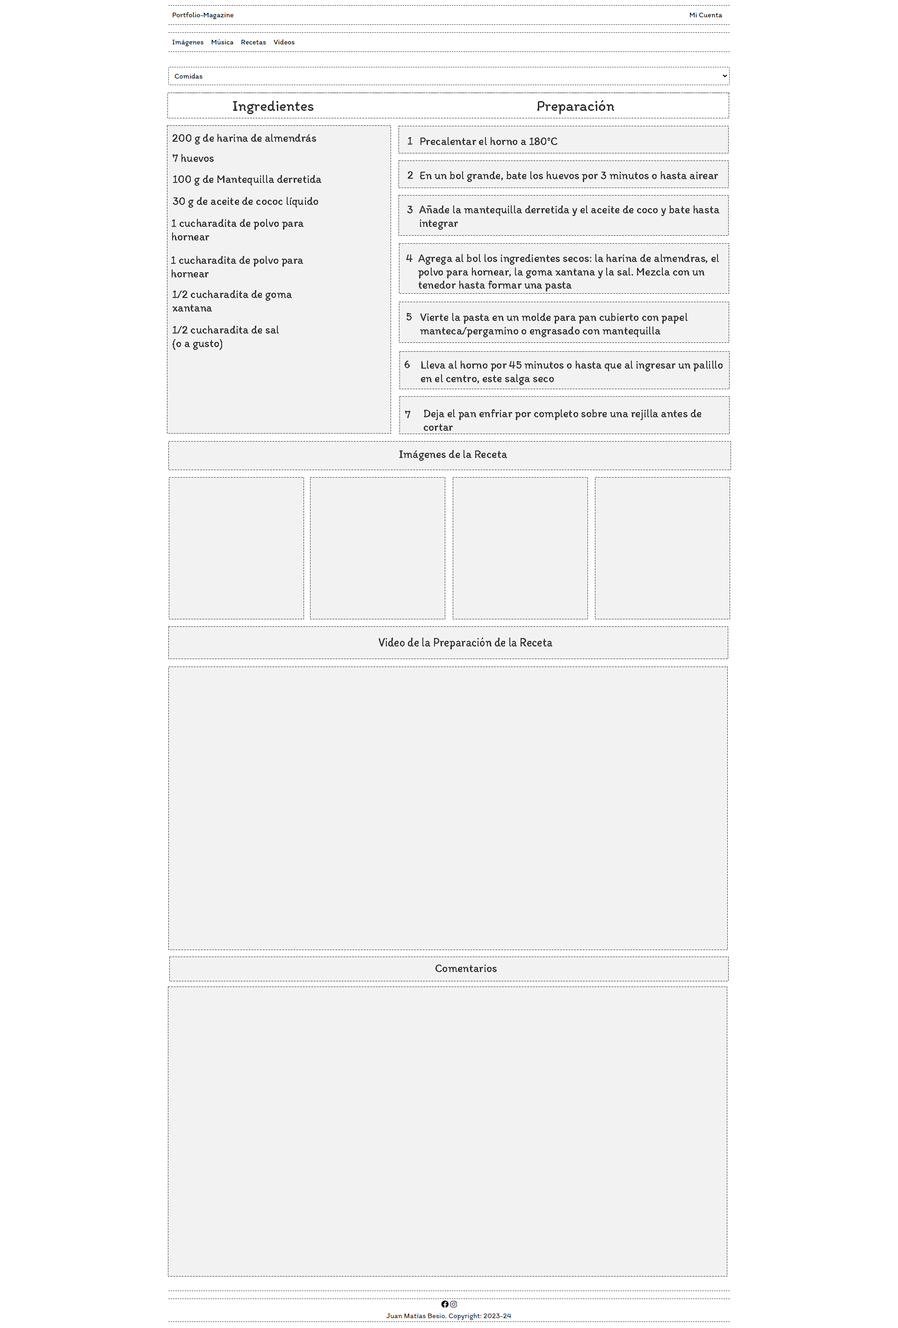
<style>
.page{position:relative;width:898px;height:1328px;background:#f2f2f2}
.page>*{position:absolute;margin:0}
.t1{font:15px "Itim-Regular";color:#333333}
.t2{font:11.2px "Itim-Regular";color:#333333}
.t3{font:12.7px "Itim-Regular";color:#333333;scale:0.88 1}
</style>
<div class="page">
<p class="t1" style="left:233px;top:101px;width:80px;height:13px">Ingredientes</p>
<p class="t1" style="left:537px;top:100px;width:77px;height:14px">Preparación</p>
<p class="t2" style="left:173px;top:134px;width:143px;height:11px">200 g de harina de almendrás</p>
<p class="t2" style="left:408px;top:137px;width:5px;height:8px">1</p>
<p class="t2" style="left:420px;top:137px;width:138px;height:8px">Precalentar el horno a 180°C</p>
<p class="t2" style="left:173px;top:154px;width:41px;height:8px">7 huevos</p>
<p class="t2" style="left:408px;top:171px;width:5px;height:8px">2</p>
<p class="t2" style="left:420px;top:171px;width:298px;height:11px">En un bol grande, bate los huevos por 3 minutos o hasta airear</p>
<p class="t2" style="left:173px;top:175px;width:148px;height:11px">100 g de Mantequilla derretida</p>
<p class="t2" style="left:173px;top:197px;width:145px;height:11px">30 g de aceite de cococ líquido</p>
<p class="t2" style="left:407px;top:206px;width:6px;height:7px">3</p>
<p class="t2" style="left:419px;top:205px;width:300px;height:25px">Añade la mantequilla derretida y el aceite de coco y bate hasta<br>integrar</p>
<p class="t2" style="left:172px;top:219px;width:132px;height:21px">1 cucharadita de polvo para <br>hornear</p>
<p class="t2" style="left:171px;top:256px;width:132px;height:21px">1 cucharadita de polvo para <br>hornear</p>
<p class="t2" style="left:406px;top:254px;width:7px;height:8px">4</p>
<p class="t2" style="left:418px;top:254px;width:301px;height:37px">Agrega al bol los ingredientes secos: la harina de almendras, el<br>polvo para hornear, la goma xantana y la sal. Mezcla con un <br>tenedor hasta formar una pasta</p>
<p class="t2" style="left:173px;top:290px;width:119px;height:21px">1/2 cucharadita de goma <br>xantana</p>
<p class="t2" style="left:406px;top:313px;width:6px;height:7px">5</p>
<p class="t2" style="left:420px;top:313px;width:268px;height:24px">Vierte la pasta en un molde para pan cubierto con papel<br>manteca/pergamino o engrasado con mantequilla</p>
<p class="t2" style="left:173px;top:326px;width:106px;height:24px">1/2 cucharadita de sal<br>(o a gusto)</p>
<p class="t2" style="left:405px;top:361px;width:5px;height:7px">6</p>
<p class="t2" style="left:421px;top:361px;width:302px;height:24px">Lleva al horno por 45 minutos o hasta que al ingresar un palillo<br>en el centro, este salga seco</p>
<p class="t2" style="left:405px;top:411px;width:5px;height:7px">7</p>
<p class="t2" style="left:424px;top:409px;width:277px;height:22px">Deja el pan enfriar por completo sobre una rejilla antes de <br>cortar</p>
<p class="t2" style="left:399px;top:450px;width:108px;height:11px">Imágenes de la Receta</p>
<p class="t3" style="left:379px;top:637px;width:173px;height:12px">Video de la Preparación de la Receta</p>
<p class="t2" style="left:435px;top:964px;width:62px;height:8px">Comentarios</p>
</div>
